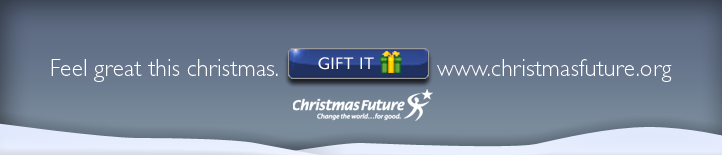
<style>
.page{position:relative;width:722px;height:155px}
.page>*{position:absolute;margin:0}
.t1{font:24px "GillSans-Light";color:#ffffff}
.t2{font:16.9px "GillSans";letter-spacing:0.025em;color:#ffffff}
</style>
<div class="page">
<p class="t1" style="left:51px;top:59px;width:621px;height:23px">Feel great this christmas.                        www.christmasfuture.org</p>
<p class="t2" style="left:318px;top:57px;width:56px;height:13px">GIFT IT</p>
</div>
